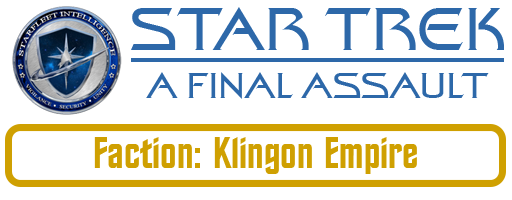
<style>
.page{position:relative;width:512px;height:200px;background:#ffffff}
.page>*{position:absolute;margin:0}
.t1{font:60px "StarTrekFilmBT-Regular";color:#2d68a9}
.t2{font:36px "StarTrekFilmBT-Regular";color:#2d68a9}
.t3{font:44px "StarTrekBT-Regular";color:#cfa001}
</style>
<div class="page">
<p class="t1" style="left:131px;top:7px;width:373px;height:43px">STAR TREK</p>
<p class="t2" style="left:146px;top:72px;width:343px;height:27px">A FINAL ASSAULT</p>
<p class="t3" style="left:94px;top:137px;width:323px;height:37px">Faction: Klingon Empire</p>
</div>
